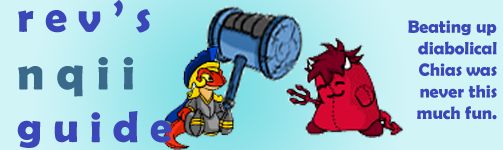
<style>
.page{position:relative;width:503px;height:150px;background:#d1f4f7}
.page>*{position:absolute;margin:0}
.t1{font:44px "BerlinSansFBDemi-Bold";color:#3b47b9}
.t2{font:48px "BerlinSansFBDemi-Bold";color:#3b698a}
.t3{font:18px "BerlinSansFBDemi-Bold";color:#3b47b9}
</style>
<div class="page">
<p class="t1" style="left:17px;top:0px;width:155px;height:148px">r e v ’ s <br><span class="t2">n q i i <br></span>g u i d e</p>
<p class="t3" style="left:408px;top:20px;width:89px;height:100px;text-align:right">Beating up diabolical Chias was never this much fun.</p>
</div>
